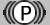
<style>
.page{position:relative;width:50px;height:25px;background:#c0c0c0}
.page>*{position:absolute;margin:0}
.t1{font:19.8px "ArialNarrow";letter-spacing:0.016em;color:#000000;font-weight:bold}
</style>
<div class="page">
<p class="t1" style="left:21px;top:6px;width:11px;height:15px">P</p>
</div>
